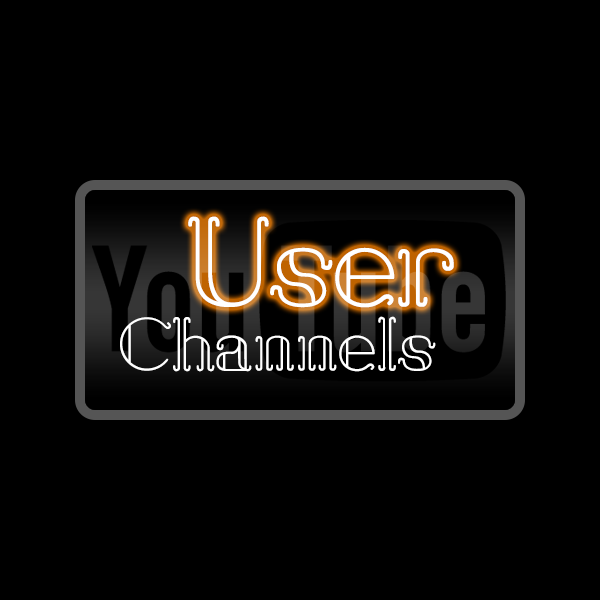
<style>
.page{position:relative;width:600px;height:600px;background:#000000}
.page>*{position:absolute;margin:0}
.t1{font:120px "SailAway";color:#ffffff}
.t2{font:72.3px "SailAway";color:#ffffff}
</style>
<div class="page">
<p class="t1" style="left:188px;top:216px;width:266px;height:92px">User</p>
<p class="t2" style="left:120px;top:316px;width:316px;height:56px">Channels</p>
</div>
